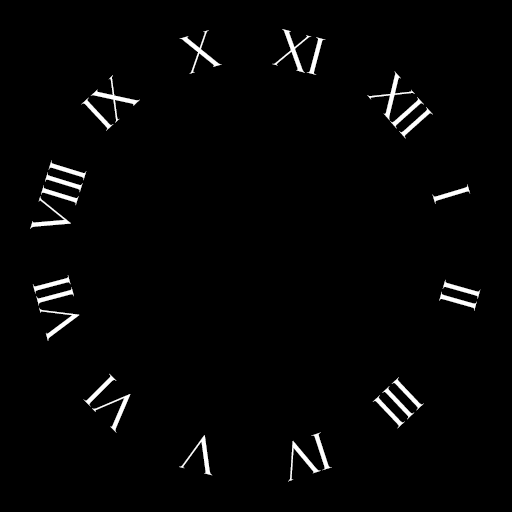
<style>
.page{position:relative;width:512px;height:512px;background:#000000}
.page>*{position:absolute;margin:0}
.t1{font:50.7px "FelixTitlingMT";color:#ffffff}
</style>
<div class="page">
<p class="t1" style="left:179px;top:30px;width:43px;height:44px;rotate:-16deg">X</p>
<p class="t1" style="left:272px;top:29px;width:54px;height:46px;rotate:15deg">XI</p>
<p class="t1" style="left:81px;top:75px;width:59px;height:56px;rotate:-43deg">Ix</p>
<p class="t1" style="left:367px;top:71px;width:66px;height:68px;rotate:48deg">XII</p>
<p class="t1" style="left:30px;top:160px;width:57px;height:69px;rotate:-73deg">VIII</p>
<p class="t1" style="left:432px;top:184px;width:39px;height:20px;rotate:73deg">I</p>
<p class="t1" style="left:32px;top:275px;width:48px;height:66px;rotate:-105deg">VII</p>
<p class="t1" style="left:439px;top:279px;width:42px;height:32px;rotate:106deg">II</p>
<p class="t1" style="left:83px;top:373px;width:48px;height:60px;rotate:-135deg">VI</p>
<p class="t1" style="left:372px;top:377px;width:52px;height:52px;rotate:137deg">III</p>
<p class="t1" style="left:179px;top:435px;width:34px;height:41px;rotate:-166deg">V</p>
<p class="t1" style="left:288px;top:432px;width:44px;height:50px;rotate:162deg">IV</p>
</div>
